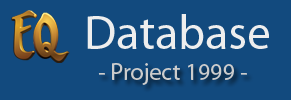
<style>
.page{position:relative;width:291px;height:100px;background:#124a7e}
.page>*{position:absolute;margin:0}
.t1{font:48px "MyriadPro-Regular";color:#eeeeee}
.t2{font:24px "MyriadPro-Regular";color:#cccccc}
</style>
<div class="page">
<p class="t1" style="left:87px;top:14px;width:182px;height:35px">Database</p>
<p class="t2" style="left:98px;top:63px;width:149px;height:22px">- Project 1999 -</p>
</div>
